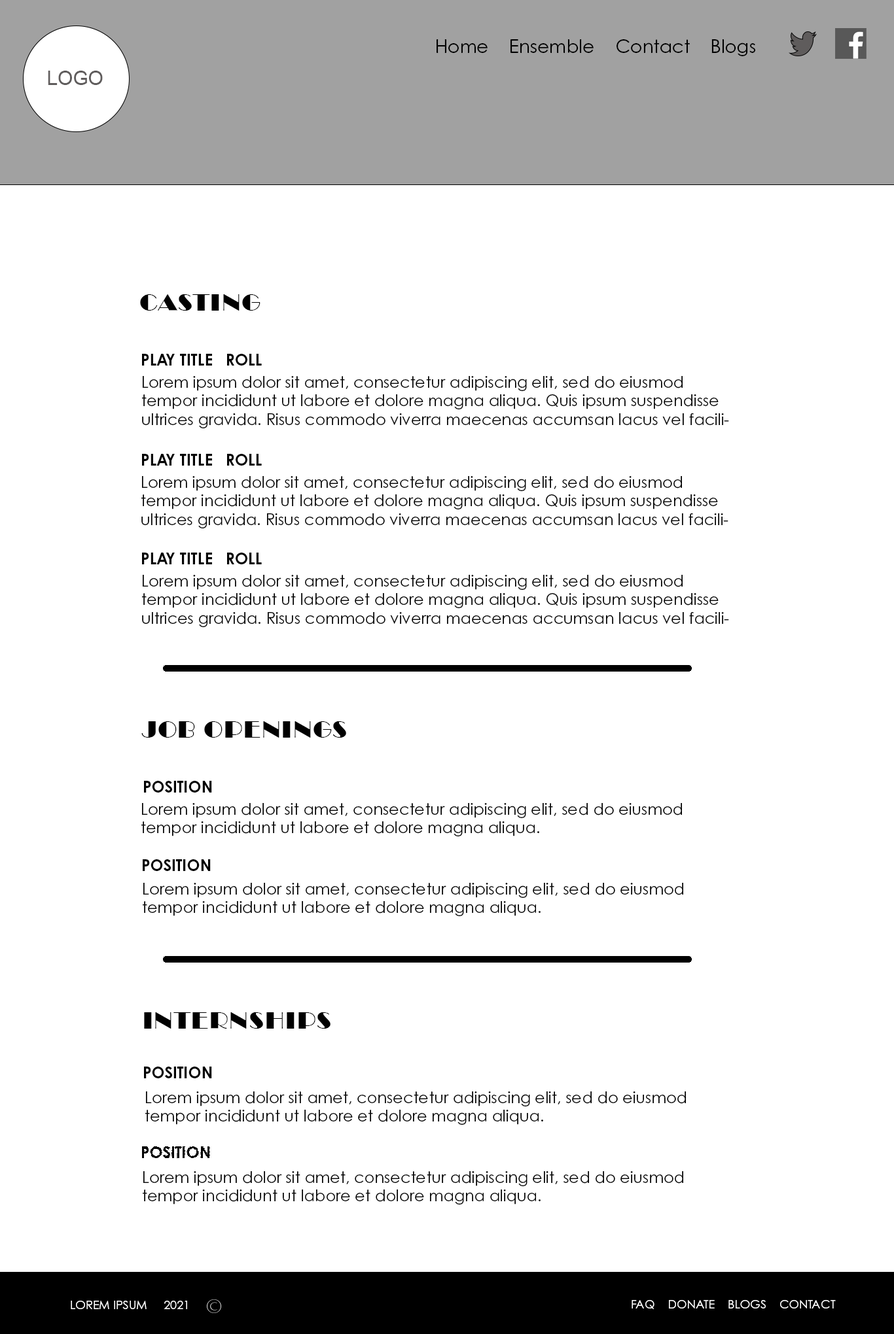
<style>
.page{position:relative;width:894px;height:1334px;background:#ffffff}
.page>*{position:absolute;margin:0}
.t1{font:18.3px "CenturyGothicPro";color:#000000}
.t2{font:19.6px "ArialMT";color:#5f5c5c}
.t3{font:23.5px "LTCBroadway-Regular";color:#010101}
.t4{font:15.7px "CenturyGothicPro-Bold";color:#010101}
.t5{font:15.7px "CenturyGothicPro";color:#010101}
.t6{font:11.8px "CenturyGothicPro";color:#ffffff}
</style>
<div class="page">
<p class="t1" style="left:436px;top:39px;width:320px;height:17px">Home    Ensemble    Contact    Blogs</p>
<p class="t2" style="left:48px;top:71px;width:55px;height:14px">LOGO</p>
<p class="t3" style="left:140px;top:294px;width:120px;height:17px">CASTING</p>
<p class="t4" style="left:142px;top:354px;width:120px;height:12px">PLAY TITLE   ROLL</p>
<p class="t5" style="left:142px;top:376px;width:587px;height:52px">Lorem ipsum dolor sit amet, consectetur adipiscing elit, sed do eiusmod tempor incididunt ut labore et dolore magna aliqua. Quis ipsum suspendisse ultrices gravida. Risus commodo viverra maecenas accumsan lacus vel facilisis.</p>
<p class="t4" style="left:142px;top:454px;width:120px;height:12px">PLAY TITLE   ROLL</p>
<p class="t5" style="left:141px;top:476px;width:587px;height:53px">Lorem ipsum dolor sit amet, consectetur adipiscing elit, sed do eiusmod tempor incididunt ut labore et dolore magna aliqua. Quis ipsum suspendisse ultrices gravida. Risus commodo viverra maecenas accumsan lacus vel facilisis.</p>
<p class="t4" style="left:142px;top:553px;width:120px;height:12px">PLAY TITLE   ROLL</p>
<p class="t5" style="left:142px;top:575px;width:587px;height:52px">Lorem ipsum dolor sit amet, consectetur adipiscing elit, sed do eiusmod tempor incididunt ut labore et dolore magna aliqua. Quis ipsum suspendisse ultrices gravida. Risus commodo viverra maecenas accumsan lacus vel facilisis.</p>
<p class="t3" style="left:141px;top:722px;width:205px;height:16px">JOB OPENINGS</p>
<p class="t4" style="left:144px;top:781px;width:68px;height:12px">POSITION</p>
<p class="t5" style="left:141px;top:803px;width:541px;height:34px">Lorem ipsum dolor sit amet, consectetur adipiscing elit, sed do eiusmod tempor incididunt ut labore et dolore magna aliqua.</p>
<p class="t4" style="left:143px;top:860px;width:68px;height:11px">POSITION</p>
<p class="t5" style="left:143px;top:883px;width:540px;height:33px">Lorem ipsum dolor sit amet, consectetur adipiscing elit, sed do eiusmod tempor incididunt ut labore et dolore magna aliqua.</p>
<p class="t3" style="left:144px;top:1013px;width:186px;height:16px">INTERNSHIPS</p>
<p class="t4" style="left:144px;top:1067px;width:68px;height:12px">POSITION</p>
<p class="t5" style="left:145px;top:1092px;width:541px;height:33px">Lorem ipsum dolor sit amet, consectetur adipiscing elit, sed do eiusmod tempor incididunt ut labore et dolore magna aliqua.</p>
<p class="t4" style="left:142px;top:1147px;width:68px;height:11px">POSITION</p>
<p class="t5" style="left:143px;top:1172px;width:540px;height:33px">Lorem ipsum dolor sit amet, consectetur adipiscing elit, sed do eiusmod tempor incididunt ut labore et dolore magna aliqua.</p>
<p class="t6" style="left:71px;top:1301px;width:116px;height:9px">LOREM IPSUM     2021</p>
<p class="t6" style="left:631px;top:1300px;width:204px;height:10px">FAQ    DONATE    BLOGS    CONTACT</p>
</div>
